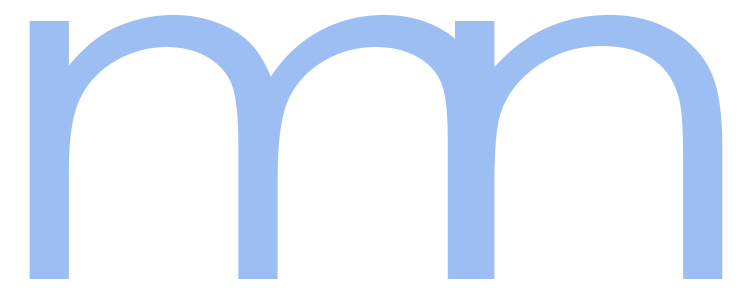
<style>
.page{position:relative;width:750px;height:291px;background:#ffffff}
.page>*{position:absolute;margin:0}
.t1{font:484.7px "CenturyGothic";letter-spacing:-0.2em;color:#9dbef3;scale:1.19 1}
</style>
<div class="page">
<p class="t1" style="left:29px;top:15px;width:694px;height:264px">mn</p>
</div>
